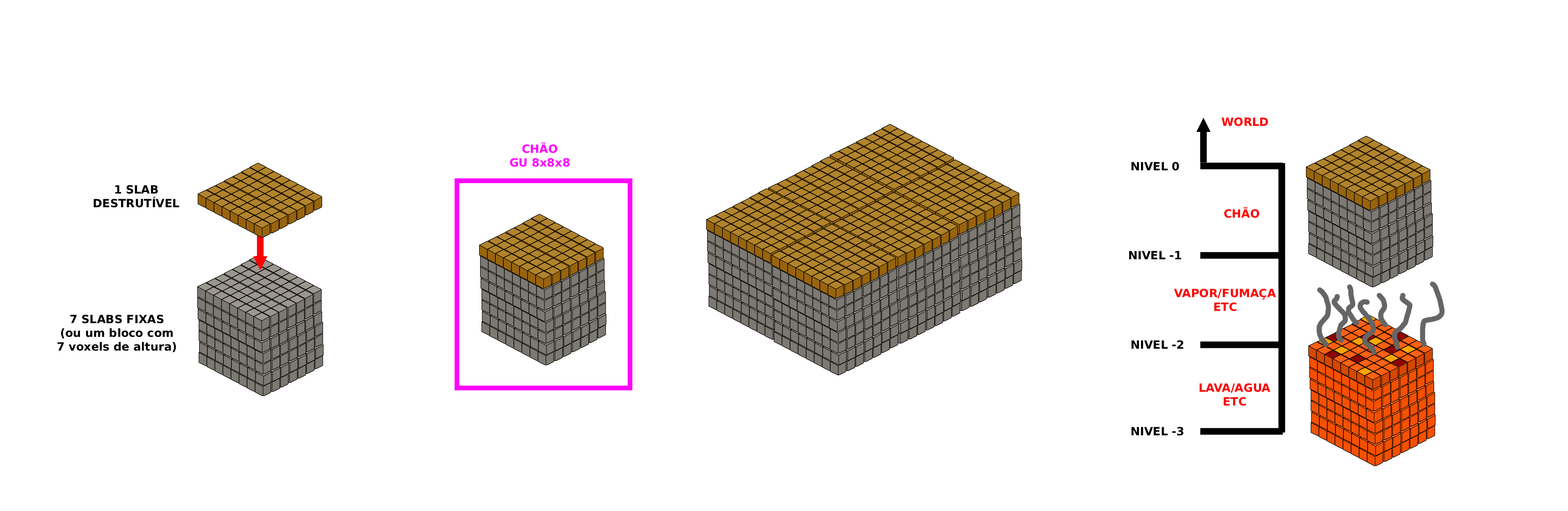
<style>
.page{position:relative;width:1568px;height:511px;background:#ffffff}
.page>*{position:absolute;margin:0}
.t1{font:11.4px "DejaVuSans-Bold";color:#ff0000}
.t2{font:11.4px "DejaVuSans-Bold";color:#ff00ff}
.t3{font:11.4px "DejaVuSans-Bold";color:#000000}
</style>
<div class="page">
<p class="t1" style="left:1221px;top:117px;width:47px;height:9px">WORLD</p>
<p class="t2" style="left:510px;top:142px;width:60px;height:25px;text-align:center">CHÃO<br>GU 8x8x8</p>
<p class="t3" style="left:1131px;top:162px;width:48px;height:9px">NIVEL 0</p>
<p class="t3" style="left:94px;top:185px;width:85px;height:23px;text-align:center">1 SLAB<br>DESTRUTÍVEL</p>
<p class="t1" style="left:1224px;top:207px;width:36px;height:11px">CHÃO</p>
<p class="t3" style="left:1129px;top:251px;width:53px;height:8px">NIVEL -1</p>
<p class="t1" style="left:1174px;top:289px;width:102px;height:22px;text-align:center">VAPOR/FUMAÇA<br>ETC</p>
<p class="t3" style="left:57px;top:315px;width:119px;height:37px;text-align:center">7 SLABS FIXAS<br>(ou um bloco com<br>7 voxels de altura)</p>
<p class="t3" style="left:1131px;top:340px;width:52px;height:9px">NIVEL -2</p>
<p class="t1" style="left:1200px;top:383px;width:70px;height:23px;text-align:center">LAVA/AGUA<br>ETC</p>
<p class="t3" style="left:1131px;top:427px;width:52px;height:9px">NIVEL -3</p>
</div>
